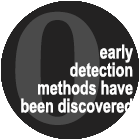
<style>
.page{position:relative;width:140px;height:140px;background:#232222}
.page>*{position:absolute;margin:0}
.t1{font:19.2px/18px "ArialNarrow-Bold";color:#ffffff;scale:0.91 1}
</style>
<div class="page">
<p class="t1" style="left:21px;top:44px;width:112px;height:69px;text-align:right">early <br>detection <br>methods have <br>been discovered</p>
</div>
